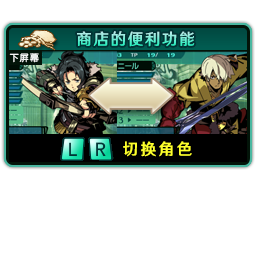
<style>
.page{position:relative;width:256px;height:256px;background:#ffffff}
.page>*{position:absolute;margin:0}
.t1{font:16px "HYWenHei-FEW";letter-spacing:0.105em;scale:0.97 1}
.t2{font:9.3px "FZY3--GB1-4";letter-spacing:0.105em;color:#ffffff;scale:0.97 1}
.t3{font:16px "HYWenHei-FEW";letter-spacing:0.165em;color:#fdff2c;scale:0.97 1}
</style>
<div class="page">
<p class="t1" style="left:77px;top:31px;width:118px;height:16px">商店的便利功能</p>
<p class="t2" style="left:9px;top:53px;width:30px;height:10px">下屏幕</p>
<p class="t3" style="left:123px;top:141px;width:69px;height:16px">切换角色</p>
</div>
